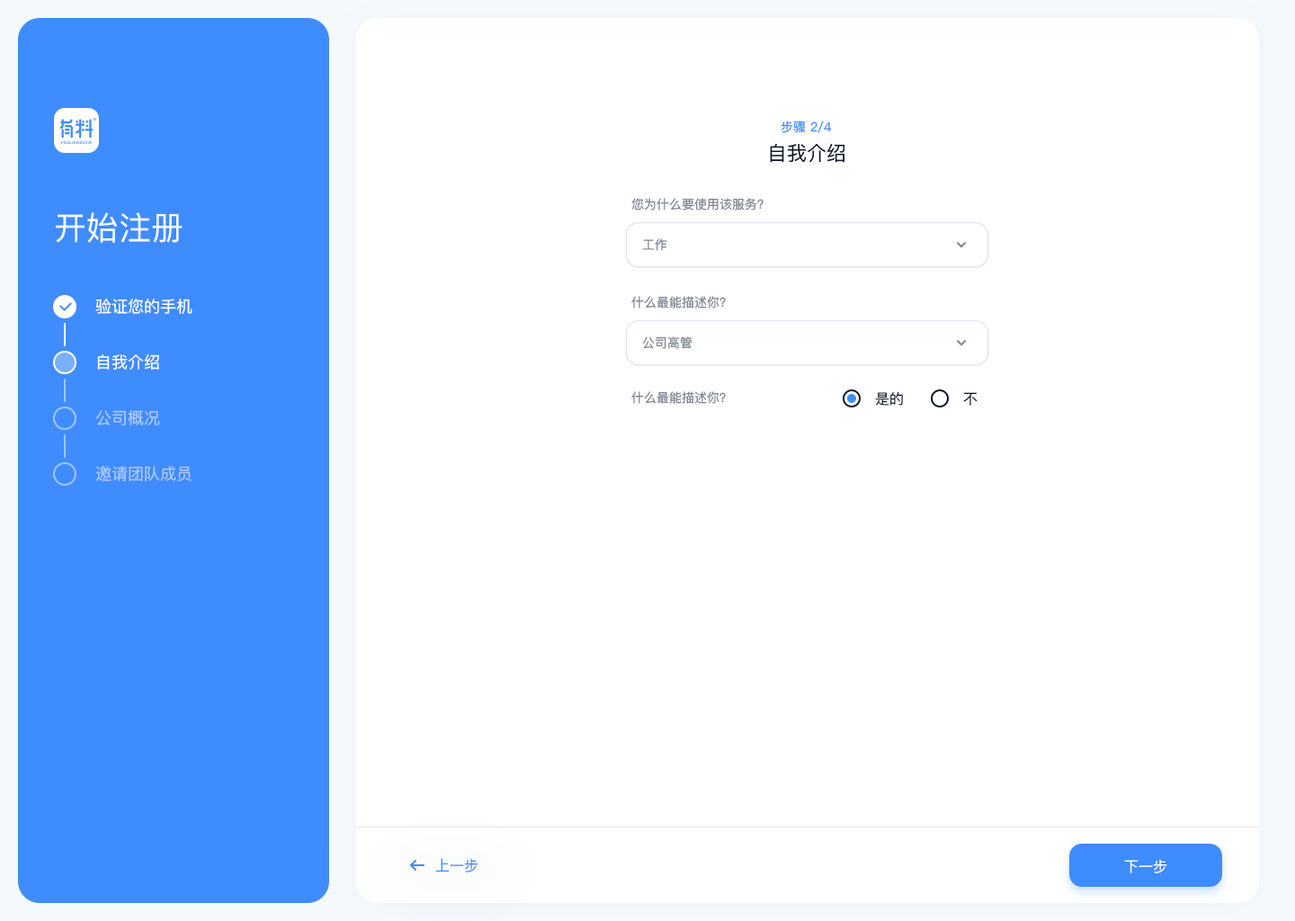
<style>
.page{position:relative;width:1295px;height:921px;background:#ffffff}
.page>*{position:absolute;margin:0}
.t1{font:12.6px "PingFangSC-Regular";color:#3f8cff;text-transform:uppercase}
.t2{font:19.8px "PingFangSC-Regular";color:#0a1629}
.t3{font:12.6px "PingFangSC-Regular";color:#7d8592}
.t4{font:32.4px "PingFangSC-Regular";color:#ffffff}
.t5{font:16.2px "PingFangSC-Regular";color:#ffffff}
.t6{font:14.4px "PingFangSC-Regular";color:#0a1629}
.t7{font:16.2px "PingFangSC-Regular";color:#b0caff}
.t8{font:14.4px "PingFangSC-Regular";color:#3f8cff}
.t9{font:14.4px "PingFangSC-Regular";color:#ffffff}
</style>
<div class="page">
<p class="t1" style="left:781px;top:121px;width:51px;height:12px">步骤 2/4</p>
<p class="t2" style="left:770px;top:143px;width:75px;height:20px">自我介绍</p>
<p class="t3" style="left:631px;top:198px;width:132px;height:12px">您为什么要使用该服务？</p>
<p class="t4" style="left:56px;top:212px;width:127px;height:31px">开始注册</p>
<p class="t3" style="left:642px;top:238px;width:25px;height:13px">工作</p>
<p class="t5" style="left:95px;top:299px;width:97px;height:15px">验证您的手机</p>
<p class="t3" style="left:631px;top:296px;width:95px;height:12px">什么最能描述你？</p>
<p class="t3" style="left:642px;top:336px;width:50px;height:13px">公司高管</p>
<p class="t5" style="left:97px;top:354px;width:62px;height:16px">自我介绍</p>
<p class="t3" style="left:631px;top:391px;width:95px;height:13px">什么最能描述你？</p>
<p class="t6" style="left:875px;top:391px;width:28px;height:15px">是的</p>
<p class="t6" style="left:963px;top:392px;width:14px;height:14px">不</p>
<p class="t7" style="left:95px;top:410px;width:65px;height:15px">公司概况</p>
<p class="t7" style="left:95px;top:466px;width:97px;height:15px">邀请团队成员</p>
<p class="t8" style="left:435px;top:858px;width:43px;height:14px">上一步</p>
<p class="t9" style="left:1124px;top:859px;width:43px;height:14px">下一步</p>
</div>
